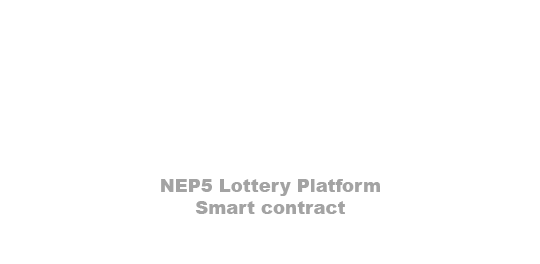
<style>
.page{position:relative;width:540px;height:264px;background:#ffffff}
.page>*{position:absolute;margin:0}
.t1{font:18px "Arial-Black";color:#a3a3a3}
</style>
<div class="page">
<p class="t1" style="left:161px;top:179px;width:219px;height:35px;text-align:center">NEP5 Lottery Platform<br>Smart contract</p>
</div>
